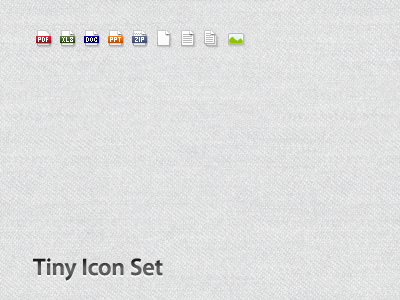
<style>
.page{position:relative;width:400px;height:300px}
.page>*{position:absolute;margin:0}
.t1{font:7px "ArialMT";color:#ffffff}
.t2{font:7px "ArialMT";color:#ffffff;scale:0.9 1}
.t3{font:7px "ArialMT";color:#ffffff;scale:0.78 1}
.t4{font:7px "ArialMT";color:#ffffff;scale:0.76 1}
.t5{font:7px "ArialMT";color:#ffffff;scale:0.79 1}
.t6{font:7px "ArialMT";color:#ffffff;scale:0.77 1}
.t7{font:24px "MyriadPro-Semibold";color:#5a5a5a}
</style>
<div class="page">
<p class="t1" style="left:38px;top:37px;width:10px;height:5px">PDF</p>
<p class="t2" style="left:62px;top:37px;width:11px;height:5px">X<span class="t1">L</span><span class="t3">S</span></p>
<p class="t2" style="left:86px;top:37px;width:11px;height:5px">D<span class="t4">O</span>C</p>
<p class="t5" style="left:110px;top:37px;width:11px;height:5px">PP<span class="t6">T</span></p>
<p class="t2" style="left:135px;top:37px;width:9px;height:5px"><span class="t6">Z</span>IP</p>
<p class="t7" style="left:33px;top:258px;width:130px;height:23px">Tiny Icon Set</p>
</div>
